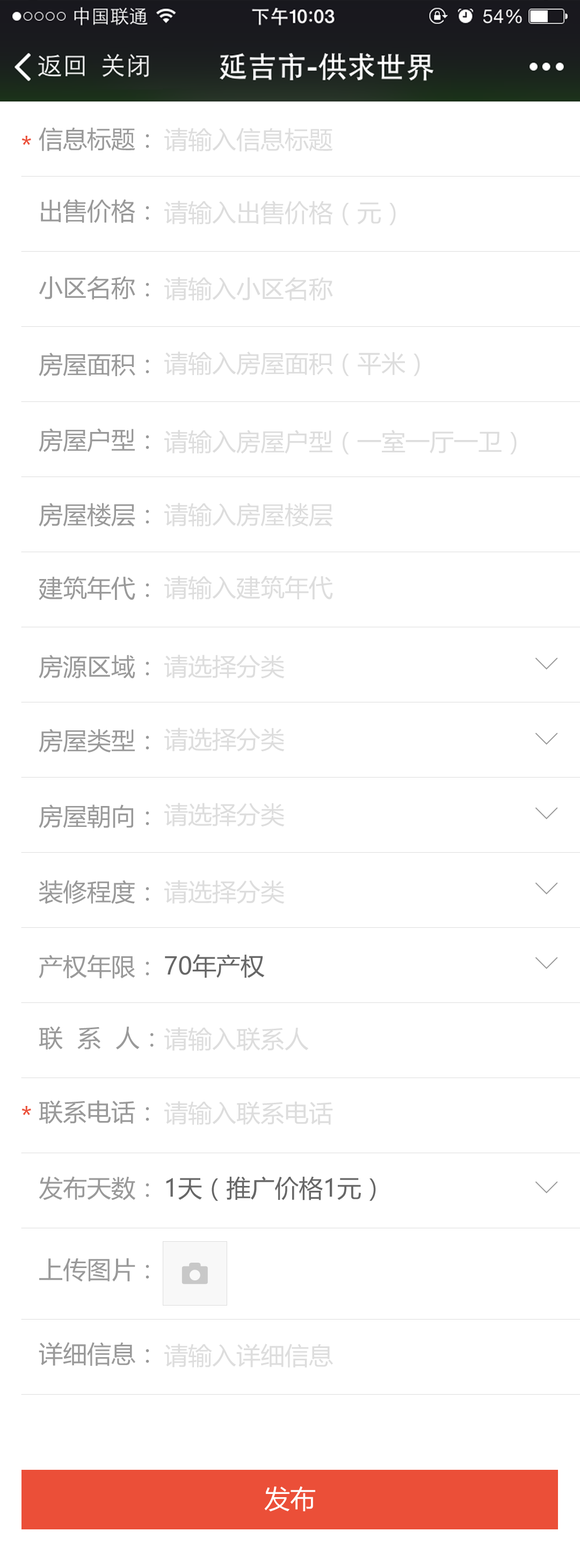
<style>
.page{position:relative;width:580px;height:1568px;background:#ffffff}
.page>*{position:absolute;margin:0}
.t1{font:24.1px "MicrosoftYaHei";color:#eb4f38}
.t2{font:24.1px/76.7px "MicrosoftYaHei";color:#999999}
.t3{font:24.1px/72.4px "MicrosoftYaHei";color:#999999}
.t4{font:24.1px/71.9px "MicrosoftYaHei";color:#999999}
.t5{font:24.1px/75.7px "MicrosoftYaHei";color:#999999}
.t6{font:24.1px/74.6px "MicrosoftYaHei";color:#999999}
.t7{font:24.1px/73.5px "MicrosoftYaHei";color:#999999}
.t8{font:24.1px/78.3px "MicrosoftYaHei";color:#999999}
.t9{font:24.1px/74.1px "MicrosoftYaHei";color:#999999}
.t10{font:24.1px/71.4px "MicrosoftYaHei";color:#999999}
.t11{font:24.1px/76.2px "MicrosoftYaHei";color:#999999}
.t12{font:24.1px/81.6px "MicrosoftYaHei";color:#999999}
.t13{font:24.1px/84.2px "MicrosoftYaHei";color:#999999}
.t14{font:24.1px "MicrosoftYaHei";color:#dddddd}
.t15{font:32.2px "NSimSun";color:#999999}
.t16{font:24.1px "MicrosoftYaHei";color:#666666}
.t17{font:25.8px "MicrosoftYaHei";color:#ffffff}
</style>
<div class="page">
<p class="t1" style="left:21px;top:136px;width:10px;height:9px">*</p>
<p class="t2" style="left:39px;top:127px;width:114px;height:1239px"><span class="t3">信息标题：<br></span><span class="t4">出售价格：<br></span>小区名称：<br>房屋面积：<br><span class="t5">房屋户型：<br></span><span class="t6">房屋楼层：<br></span><span class="t7">建筑年代：<br></span><span class="t8">房源区域：<br></span><span class="t9">房屋类型：<br></span><span class="t5">房屋朝向：<br>装修程度：<br></span><span class="t6">产权年限：<br></span><span class="t10">联  系  人：<br></span><span class="t9">联系电话：<br></span><span class="t11">发布天数：<br></span><span class="t12">上传图片：<br></span><span class="t13">详细信息：</span></p>
<p class="t14" style="left:164px;top:128px;width:169px;height:24px">请输入信息标题</p>
<p class="t14" style="left:164px;top:201px;width:231px;height:24px">请输入出售价格（元）</p>
<p class="t14" style="left:164px;top:277px;width:169px;height:24px">请输入小区名称</p>
<p class="t14" style="left:164px;top:351px;width:256px;height:25px">请输入房屋面积（平米）</p>
<p class="t14" style="left:164px;top:430px;width:352px;height:25px">请输入房屋户型（一室一厅一卫）</p>
<p class="t14" style="left:164px;top:503px;width:169px;height:24px">请输入房屋楼层</p>
<p class="t14" style="left:164px;top:576px;width:169px;height:24px">请输入建筑年代</p>
<p class="t14" style="left:164px;top:655px;width:120px;height:24px">请选择分类</p>
<p class="t15" style="left:534px;top:657px;width:24px;height:13px;rotate:90deg">&gt;</p>
<p class="t14" style="left:164px;top:728px;width:120px;height:24px">请选择分类</p>
<p class="t15" style="left:534px;top:732px;width:24px;height:13px;rotate:90deg">&gt;</p>
<p class="t14" style="left:164px;top:803px;width:120px;height:24px">请选择分类</p>
<p class="t15" style="left:534px;top:807px;width:24px;height:12px;rotate:90deg">&gt;</p>
<p class="t14" style="left:164px;top:880px;width:120px;height:24px">请选择分类</p>
<p class="t15" style="left:534px;top:882px;width:24px;height:13px;rotate:90deg">&gt;</p>
<p class="t16" style="left:165px;top:954px;width:100px;height:24px">70年产权</p>
<p class="t15" style="left:534px;top:957px;width:24px;height:12px;rotate:90deg">&gt;</p>
<p class="t14" style="left:164px;top:1027px;width:145px;height:24px">请输入联系人</p>
<p class="t1" style="left:21px;top:1106px;width:10px;height:9px">*</p>
<p class="t14" style="left:164px;top:1101px;width:169px;height:24px">请输入联系电话</p>
<p class="t16" style="left:166px;top:1176px;width:210px;height:25px">1天（推广价格1元）</p>
<p class="t15" style="left:534px;top:1181px;width:24px;height:12px;rotate:90deg">&gt;</p>
<p class="t14" style="left:164px;top:1344px;width:169px;height:24px">请输入详细信息</p>
<p class="t17" style="left:264px;top:1486px;width:51px;height:26px">发布</p>
</div>
